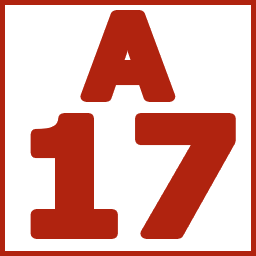
<style>
.page{position:relative;width:256px;height:256px;background:#ffffff}
.page>*{position:absolute;margin:0}
.t1{font:112.6px "Verdana-Bold";color:#b0230f}
.t2{font:158.6px "Verdana-Bold";color:#b0230f}
</style>
<div class="page">
<p class="t1" style="left:85px;top:15px;width:86px;height:82px">A</p>
<p class="t2" style="left:35px;top:118px;width:196px;height:116px">17</p>
</div>
